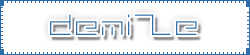
<style>
.page{position:relative;width:250px;height:55px;background:#ffffff}
.page>*{position:absolute;margin:0}
.t1{font:40px "MINIMALHARD2";color:#2d6ea8}
</style>
<div class="page">
<p class="t1" style="left:50px;top:14px;width:147px;height:21px">demiZe</p>
</div>
